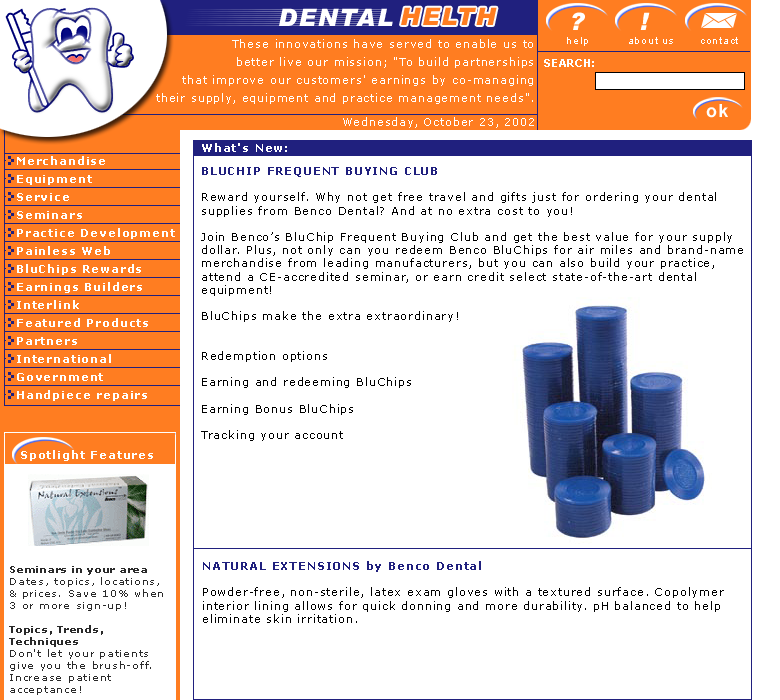
<style>
.page{position:relative;width:780px;height:700px;background:#ffffff}
.page>*{position:absolute;margin:0}
.t1{font:24px "Arial-BlackItalic";letter-spacing:0.075em;color:#ffffff}
.t2{font:24px "Arial-BlackItalic";letter-spacing:0.075em;color:#ff7d21}
.t3{font:11px/18px "Verdana";letter-spacing:0.075em;color:#ffffff}
.t4{font:10px "ArialMT";letter-spacing:0.075em;color:#ffffff}
.t5{font:18px "Arial-BoldMT";letter-spacing:0.075em;color:#ffffff}
.t6{font:11px "Verdana";letter-spacing:0.075em;color:#ffffff}
.t7{font:11px "Verdana-Bold";letter-spacing:0.075em;color:#ffffff}
.t8{font:11px/18px "Verdana-Bold";letter-spacing:0.075em;color:#ffffff}
.t9{font:11px "Verdana";letter-spacing:0.075em;color:#000000}
.t10{font:11px "Verdana-Bold";letter-spacing:0.075em;color:#20207e}
.t11{font:10px "Verdana";letter-spacing:0.075em;color:#2a2a2a}
.t12{font:10px "Verdana-Bold";letter-spacing:0.075em;color:#2a2a2a}
</style>
<div class="page">
<p class="t1" style="left:279px;top:8px;width:114px;height:18px">DENTAL</p>
<p class="t2" style="left:401px;top:7px;width:96px;height:18px">HELTH</p>
<p class="t1" style="left:572px;top:12px;width:78px;height:18px">?     !</p>
<p class="t3" style="left:156px;top:39px;width:377px;height:65px;text-align:right">These innovations have served to enable us to <br> better live our mission; "To build partnerships <br> that improve our customers' earnings by co-managing <br> their supply, equipment and practice management needs".</p>
<p class="t4" style="left:567px;top:37px;width:171px;height:9px">help          about us       contact</p>
<p class="t5" style="left:706px;top:104px;width:22px;height:14px">ok</p>
<p class="t6" style="left:343px;top:117px;width:191px;height:11px">Wednesday, October 23, 2002</p>
<p class="t7" style="left:202px;top:143px;width:85px;height:9px">What's New:</p>
<p class="t8" style="left:17px;top:156px;width:158px;height:245px">Merchandise<br>Equipment<br>Service<br>Seminars<br>Practice Development<br>Painless Web<br>BluChips Rewards<br>Earnings Builders<br>Interlink<br>Featured Products<br>Partners<br>International<br>Government<br>Handpiece repairs</p>
<p class="t9" style="left:201px;top:167px;width:542px;height:274px"><span class="t10">BLUCHIP FREQUENT BUYING CLUB   <br></span><br>Reward yourself. Why not get free travel and gifts just for ordering your dental <br>supplies from Benco Dental? And at no extra cost to you!  <br><br>Join Benco’s BluChip Frequent Buying Club and get the best value for your supply <br>dollar. Plus, not only can you redeem Benco BluChips for air miles and brand-name <br>merchandise from leading manufacturers, but you can also build your practice, <br>attend a CE-accredited seminar, or earn credit select state-of-the-art dental <br>equipment! <br><br>BluChips make the extra extraordinary! <br><br><br>Redemption options <br><br>Earning and redeeming BluChips <br><br>Earning Bonus BluChips <br><br>Tracking your account</p>
<p class="t7" style="left:21px;top:450px;width:132px;height:11px">Spotlight Features</p>
<p class="t11" style="left:9px;top:566px;width:154px;height:129px"><span class="t12">Seminars in your area</span> <br>Dates, topics, locations, <br>&amp; prices. Save 10% when <br>3 or more sign-up! <br><br><span class="t12">Topics, Trends, <br>Techniques <br></span>Don't let your patients <br>give you the brush-off. <br>Increase patient <br>acceptance!</p>
<p class="t9" style="left:203px;top:561px;width:521px;height:62px"><span class="t10">NATURAL EXTENSIONS by Benco Dental<br></span><br>Powder-free, non-sterile, latex exam gloves with a textured surface. Copolymer <br>interior lining allows for quick donning and more durability. pH balanced to help <br>eliminate skin irritation.</p>
</div>
